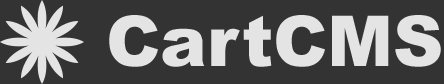
<style>
.page{position:relative;width:444px;height:84px;background:#333333}
.page>*{position:absolute;margin:0}
.t1{font:70.3px "Arial-Black";color:#e4e4e4}
</style>
<div class="page">
<p class="t1" style="left:109px;top:15px;width:332px;height:52px">CartCMS</p>
</div>
